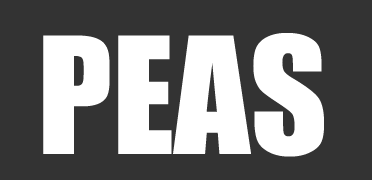
<style>
.page{position:relative;width:372px;height:180px;background:#333333}
.page>*{position:absolute;margin:0}
.t1{font:150.1px "Impact";color:#ffffff}
</style>
<div class="page">
<p class="t1" style="left:43px;top:33px;width:281px;height:124px">PEAS</p>
</div>
